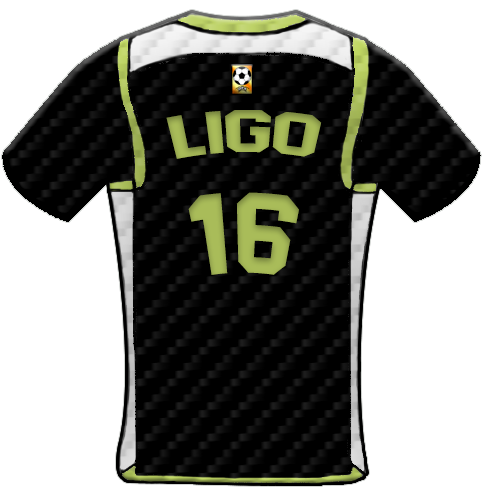
<style>
.page{position:relative;width:482px;height:494px;background:#ffffff}
.page>*{position:absolute;margin:0}
.t1{font:59.4px "AdidasHalfBlock2016";color:#a9bc59;scale:1.13 1}
.t2{font:113.8px "AdidasHalfBlock2016";color:#a9bc59}
</style>
<div class="page">
<p class="t1" style="left:166px;top:110px;width:156px;height:49px">Ligo</p>
<p class="t2" style="left:188px;top:192px;width:111px;height:83px">16</p>
</div>
